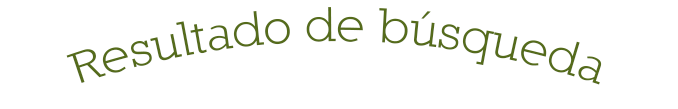
<style>
.page{position:relative;width:678px;height:109px;background:#ffffff}
.page>*{position:absolute;margin:0}
.t1{font:50px "Nilland-SmallCaps";color:#556b1b}
</style>
<div class="page">
<p class="t1" style="left:66px;top:7px;width:536px;height:78px">Resultado de búsqueda</p>
</div>
